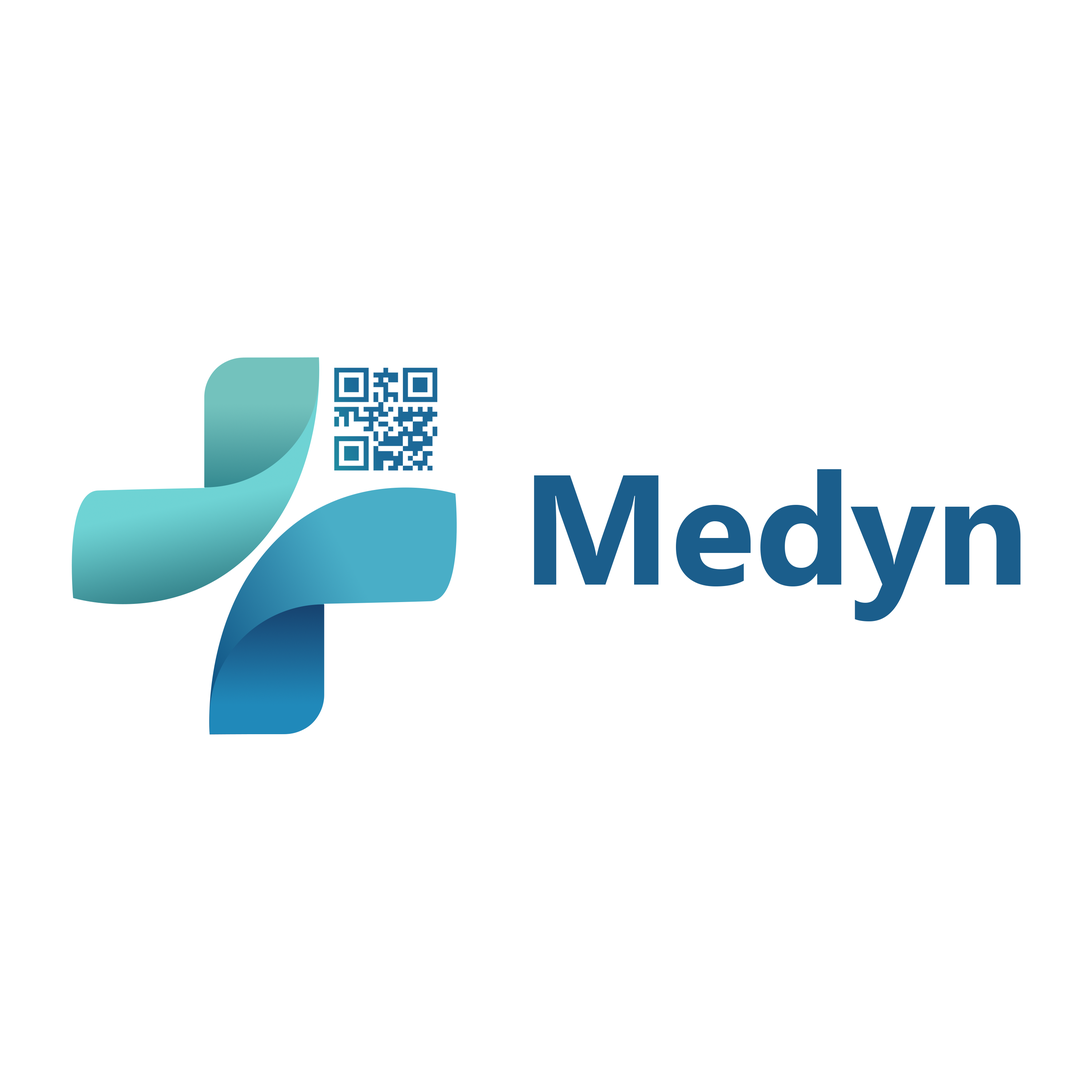
<style>
.page{position:relative;width:1092px;height:1092px;background:#ffffff}
.page>*{position:absolute;margin:0}
.t1{font:155.7px "Gadugi-Bold";color:#1b5e8c}
</style>
<div class="page">
<p class="t1" style="left:534px;top:469px;width:487px;height:152px">Medyn</p>
</div>
